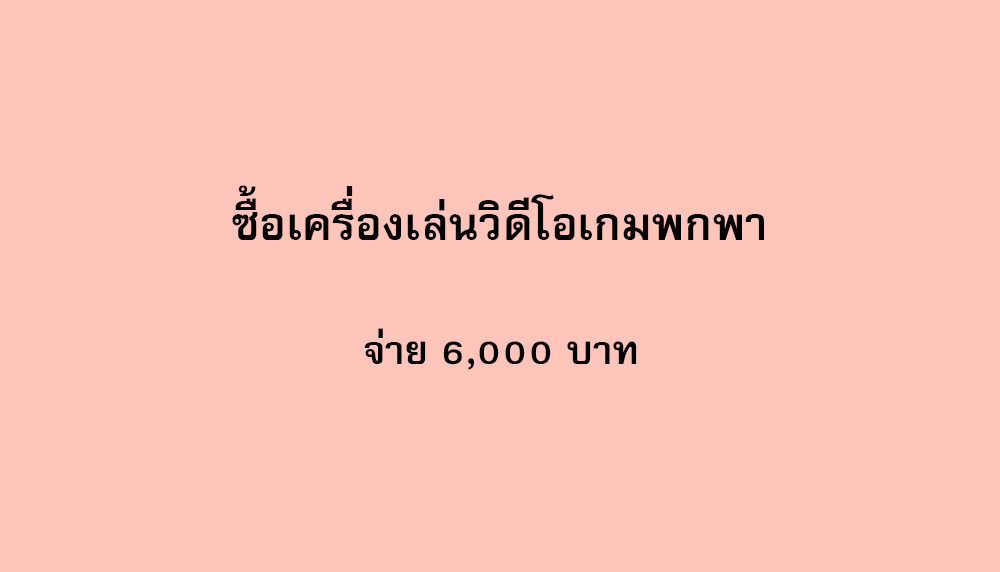
<style>
.page{position:relative;width:1000px;height:572px;background:#ffc4ba}
.page>*{position:absolute;margin:0}
.t1{font:64px "FreesiaUPCBold";color:#000000}
.t2{font:56px "FreesiaUPCBold";color:#000000}
</style>
<div class="page">
<p class="t1" style="left:232px;top:185px;width:532px;height:55px">ซื้อเครื่องเล่นวิดีโอเกมพกพา</p>
<p class="t2" style="left:364px;top:328px;width:273px;height:42px">จ่าย 6,000 บาท</p>
</div>
